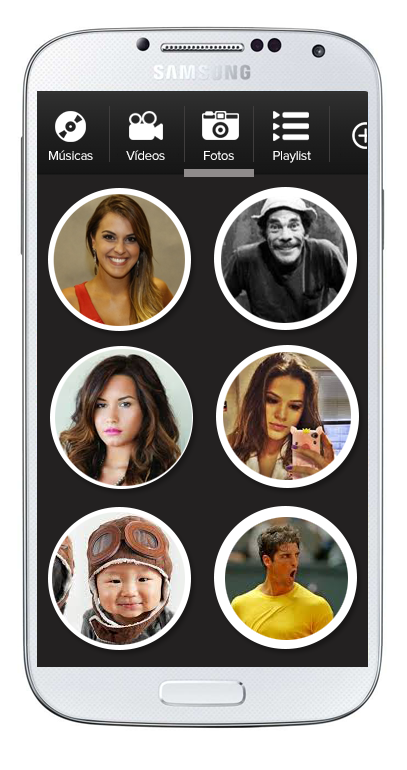
<style>
.page{position:relative;width:407px;height:770px;background:#ffffff}
.page>*{position:absolute;margin:0}
.t1{font:13.4px "ProximaNova-Regular";letter-spacing:-0.025em;color:#ffffff}
</style>
<div class="page">
<p class="t1" style="left:49px;top:150px;width:44px;height:10px">Músicas</p>
<p class="t1" style="left:126px;top:150px;width:39px;height:10px">Vídeos</p>
<p class="t1" style="left:204px;top:151px;width:30px;height:9px">Fotos</p>
<p class="t1" style="left:273px;top:151px;width:38px;height:12px">Playlist</p>
</div>
